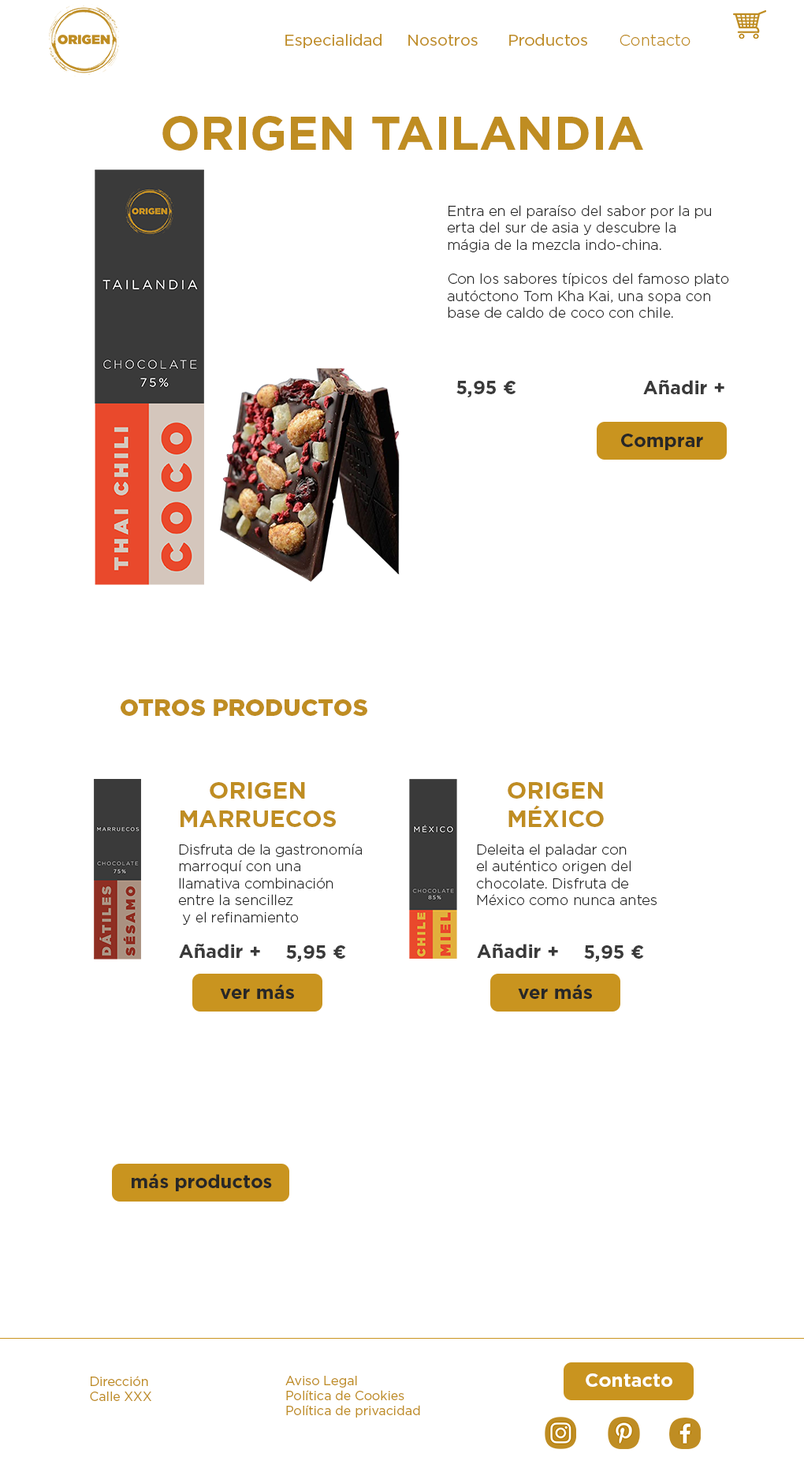
<style>
.page{position:relative;width:804px;height:1483px;background:#ffffff}
.page>*{position:absolute;margin:0}
.t1{font:15.8px "Gotham-Book";color:#bf8d22}
.t2{font:15.8px "Gotham-Light";color:#bf8d22}
.t3{font:47.3px "Gotham-Bold";color:#bf8d22}
.t4{font:14.2px "Gotham-Light";color:#272727}
.t5{font:18.9px "Gotham-Bold";color:#3a3a3a}
.t6{font:18.9px "Gotham-Bold";color:#272727}
.t7{font:23.7px "Gotham-Black";color:#bf8d22}
.t8{font:23.6px "Gotham-Bold";color:#bf8d22}
.t9{font:18.9px "Gotham-Bold";color:#ffffff}
.t10{font:12.6px "Gotham-Book";color:#bf8d22}
</style>
<div class="page">
<p class="t1" style="left:285px;top:34px;width:97px;height:14px">Especialidad</p>
<p class="t1" style="left:408px;top:34px;width:70px;height:12px">Nosotros</p>
<p class="t1" style="left:509px;top:34px;width:78px;height:12px">Productos</p>
<p class="t2" style="left:620px;top:34px;width:71px;height:12px">Contacto</p>
<p class="t3" style="left:162px;top:116px;width:481px;height:35px">ORIGEN TAILANDIA</p>
<p class="t4" style="left:448px;top:205px;width:281px;height:113px">Entra en el paraíso del sabor por la pu erta del sur de asia y descubre la<br>mágia de la mezcla indo-china.<br><br>Con los sabores típicos del famoso plato autóctono Tom Kha Kai, una sopa con base de caldo de coco con chile.</p>
<p class="t5" style="left:456px;top:381px;width:60px;height:16px">5,95 €</p>
<p class="t5" style="left:643px;top:379px;width:81px;height:15px">Añadir +</p>
<p class="t6" style="left:621px;top:434px;width:82px;height:16px">Comprar</p>
<p class="t7" style="left:121px;top:699px;width:246px;height:17px">OTROS PRODUCTOS</p>
<p class="t8" style="left:181px;top:782px;width:155px;height:45px;text-align:center">ORIGEN<br>MARRUECOS</p>
<p class="t8" style="left:508px;top:782px;width:96px;height:45px;text-align:center">ORIGEN<br>MÉXICO</p>
<p class="t4" style="left:179px;top:844px;width:183px;height:81px">Disfruta de la gastronomía<br>marroquí con una <br>llamativa combinación <br>entre la sencillez<br> y el refinamiento</p>
<p class="t4" style="left:477px;top:844px;width:180px;height:61px">Deleita el paladar con <br>el auténtico origen del <br>chocolate. Disfruta de <br>México como nunca antes</p>
<p class="t5" style="left:179px;top:943px;width:81px;height:15px">Añadir +</p>
<p class="t5" style="left:286px;top:945px;width:60px;height:17px">5,95 €</p>
<p class="t5" style="left:477px;top:943px;width:81px;height:15px">Añadir +</p>
<p class="t5" style="left:584px;top:945px;width:60px;height:17px">5,95 €</p>
<p class="t6" style="left:220px;top:984px;width:74px;height:15px">ver más</p>
<p class="t6" style="left:518px;top:984px;width:74px;height:15px">ver más</p>
<p class="t6" style="left:132px;top:1173px;width:140px;height:18px">más productos</p>
<p class="t9" style="left:586px;top:1373px;width:86px;height:14px">Contacto</p>
<p class="t10" style="left:90px;top:1376px;width:61px;height:25px">Dirección<br>Calle XXX</p>
<p class="t10" style="left:285px;top:1376px;width:135px;height:41px">Aviso Legal<br>Política de Cookies<br>Política de privacidad</p>
</div>
